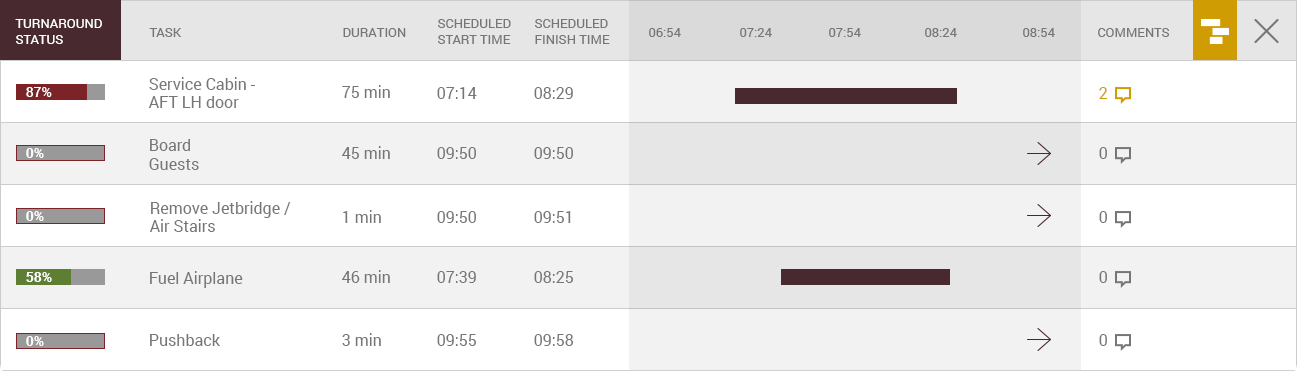
<style>
.page{position:relative;width:1297px;height:371px;background:#f2f2f2}
.page>*{position:absolute;margin:0}
.t1{font:13px "Roboto-Regular";color:#ffffff;text-transform:uppercase}
.t2{font:13px "Roboto-Regular";color:#767676;text-transform:uppercase}
.t3{font:16px/18px "Roboto-Regular";color:#767676}
.t4{font:14px "Roboto-Medium";color:#fefefe}
.t5{font:16px "Roboto-Regular";color:#767676}
.t6{font:16px "Roboto-Regular";color:#d09c04}
.t7{font:14px "Roboto-Bold";color:#fefefe}
</style>
<div class="page">
<p class="t1" style="left:15px;top:19px;width:87px;height:25px">Turnaround<br>status</p>
<p class="t2" style="left:149px;top:28px;width:33px;height:9px">Task</p>
<p class="t2" style="left:343px;top:28px;width:63px;height:9px">Duration</p>
<p class="t2" style="left:438px;top:19px;width:73px;height:25px">Scheduled<br>Start Time</p>
<p class="t2" style="left:535px;top:19px;width:75px;height:25px">Scheduled<br>Finish Time</p>
<p class="t2" style="left:649px;top:28px;width:32px;height:9px">06:54</p>
<p class="t2" style="left:740px;top:28px;width:32px;height:9px">07:24</p>
<p class="t2" style="left:829px;top:28px;width:32px;height:9px">07:54</p>
<p class="t2" style="left:925px;top:28px;width:32px;height:9px">08:24</p>
<p class="t2" style="left:1023px;top:28px;width:32px;height:9px">08:54</p>
<p class="t2" style="left:1098px;top:28px;width:71px;height:9px">Comments</p>
<p class="t3" style="left:148px;top:77px;width:107px;height:31px">Service Cabin -<br>AFT LH door</p>
<p class="t4" style="left:26px;top:87px;width:26px;height:10px">87%</p>
<p class="t5" style="left:342px;top:85px;width:48px;height:13px">75 min</p>
<p class="t5" style="left:437px;top:87px;width:40px;height:12px">07:14</p>
<p class="t5" style="left:534px;top:87px;width:39px;height:12px">08:29</p>
<p class="t6" style="left:1099px;top:87px;width:9px;height:12px">2</p>
<p class="t7" style="left:26px;top:148px;width:18px;height:10px">0%</p>
<p class="t5" style="left:149px;top:139px;width:50px;height:31px">Board<br>Guests</p>
<p class="t5" style="left:342px;top:146px;width:48px;height:13px">45 min</p>
<p class="t5" style="left:437px;top:147px;width:39px;height:12px">09:50</p>
<p class="t5" style="left:534px;top:147px;width:39px;height:12px">09:50</p>
<p class="t5" style="left:1099px;top:147px;width:8px;height:12px">0</p>
<p class="t3" style="left:149px;top:201px;width:142px;height:31px">Remove Jetbridge /<br>Air Stairs</p>
<p class="t7" style="left:26px;top:211px;width:18px;height:10px">0%</p>
<p class="t5" style="left:343px;top:210px;width:38px;height:13px">1 min</p>
<p class="t5" style="left:437px;top:211px;width:39px;height:12px">09:50</p>
<p class="t5" style="left:534px;top:211px;width:37px;height:12px">09:51</p>
<p class="t5" style="left:1099px;top:211px;width:8px;height:12px">0</p>
<p class="t5" style="left:342px;top:270px;width:48px;height:13px">46 min</p>
<p class="t7" style="left:26px;top:272px;width:26px;height:10px">58%</p>
<p class="t5" style="left:150px;top:271px;width:93px;height:17px">Fuel Airplane</p>
<p class="t5" style="left:437px;top:271px;width:39px;height:12px">07:39</p>
<p class="t5" style="left:534px;top:271px;width:39px;height:12px">08:25</p>
<p class="t5" style="left:1099px;top:271px;width:8px;height:12px">0</p>
<p class="t7" style="left:26px;top:336px;width:18px;height:10px">0%</p>
<p class="t5" style="left:150px;top:334px;width:70px;height:12px">Pushback</p>
<p class="t5" style="left:342px;top:333px;width:39px;height:13px">3 min</p>
<p class="t5" style="left:437px;top:334px;width:39px;height:12px">09:55</p>
<p class="t5" style="left:534px;top:334px;width:40px;height:12px">09:58</p>
<p class="t5" style="left:1099px;top:334px;width:8px;height:12px">0</p>
</div>
